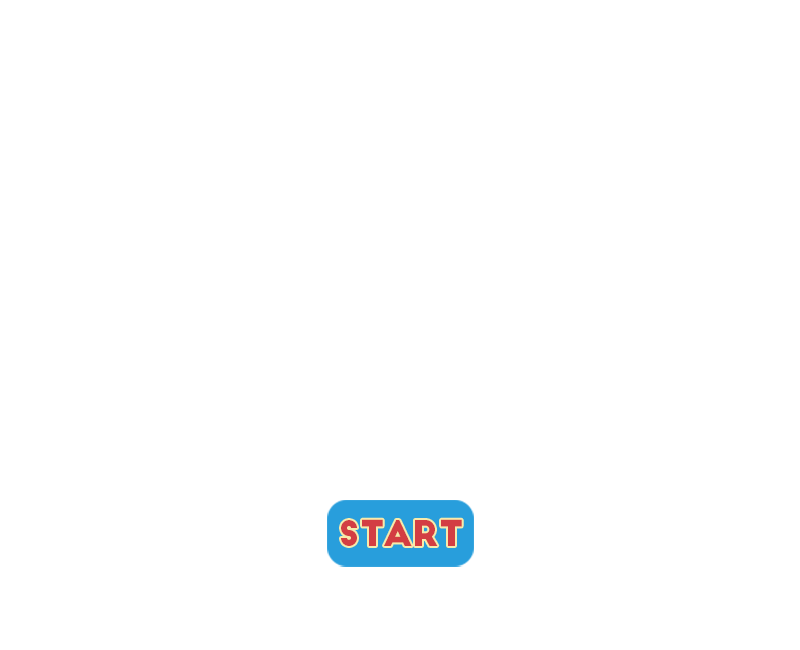
<style>
.page{position:relative;width:800px;height:650px;background:#ffffff}
.page>*{position:absolute;margin:0}
.t1{font:35px "BigJohn";color:#d33e43}
</style>
<div class="page">
<p class="t1" style="left:341px;top:519px;width:121px;height:28px">START</p>
</div>
